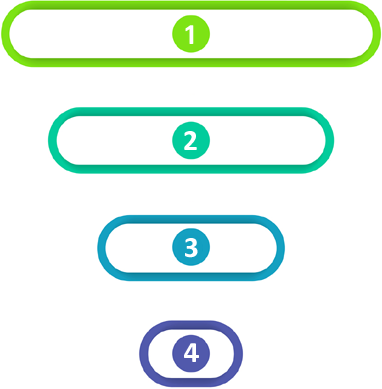
<style>
.page{position:relative;width:382px;height:389px;background:#ffffff}
.page>*{position:absolute;margin:0}
.t1{font:29.9px "Calibri-Bold";color:#ffffff}
</style>
<div class="page">
<p class="t1" style="left:185px;top:25px;width:9px;height:19px">1</p>
<p class="t1" style="left:184px;top:131px;width:13px;height:19px">2</p>
<p class="t1" style="left:185px;top:238px;width:13px;height:20px">3</p>
<p class="t1" style="left:184px;top:343px;width:15px;height:19px">4</p>
</div>
